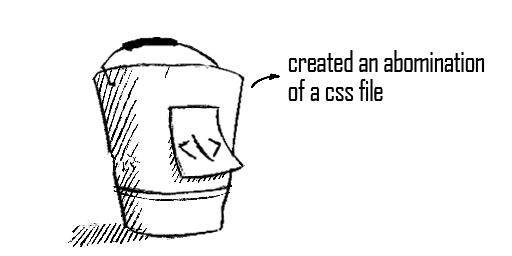
<style>
.page{position:relative;width:512px;height:256px;background:#ffffff}
.page>*{position:absolute;margin:0}
.t1{font:28.7px/28.7px "AgencyFB-Reg";letter-spacing:-0.025em;color:#000000}
</style>
<div class="page">
<p class="t1" style="left:288px;top:50px;width:197px;height:51px">created an abomination <br>of a css file</p>
</div>
